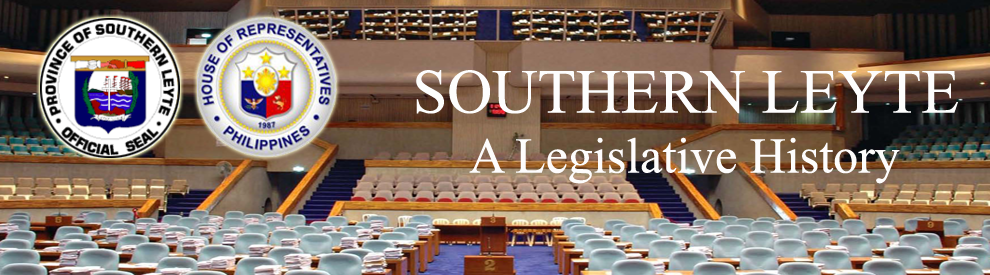
<style>
.page{position:relative;width:990px;height:275px}
.page>*{position:absolute;margin:0}
.t1{font:50px "TimesNewRomanPSMT";color:#fdfcfc}
.t2{font:62.5px "TimesNewRomanPSMT";color:#fdfdfd}
</style>
<div class="page">
<p class="t1" style="left:416px;top:70px;width:542px;height:114px;text-align:center"><span class="t2">SOUTHERN LEYTE<br></span>A Legislative History</p>
</div>
